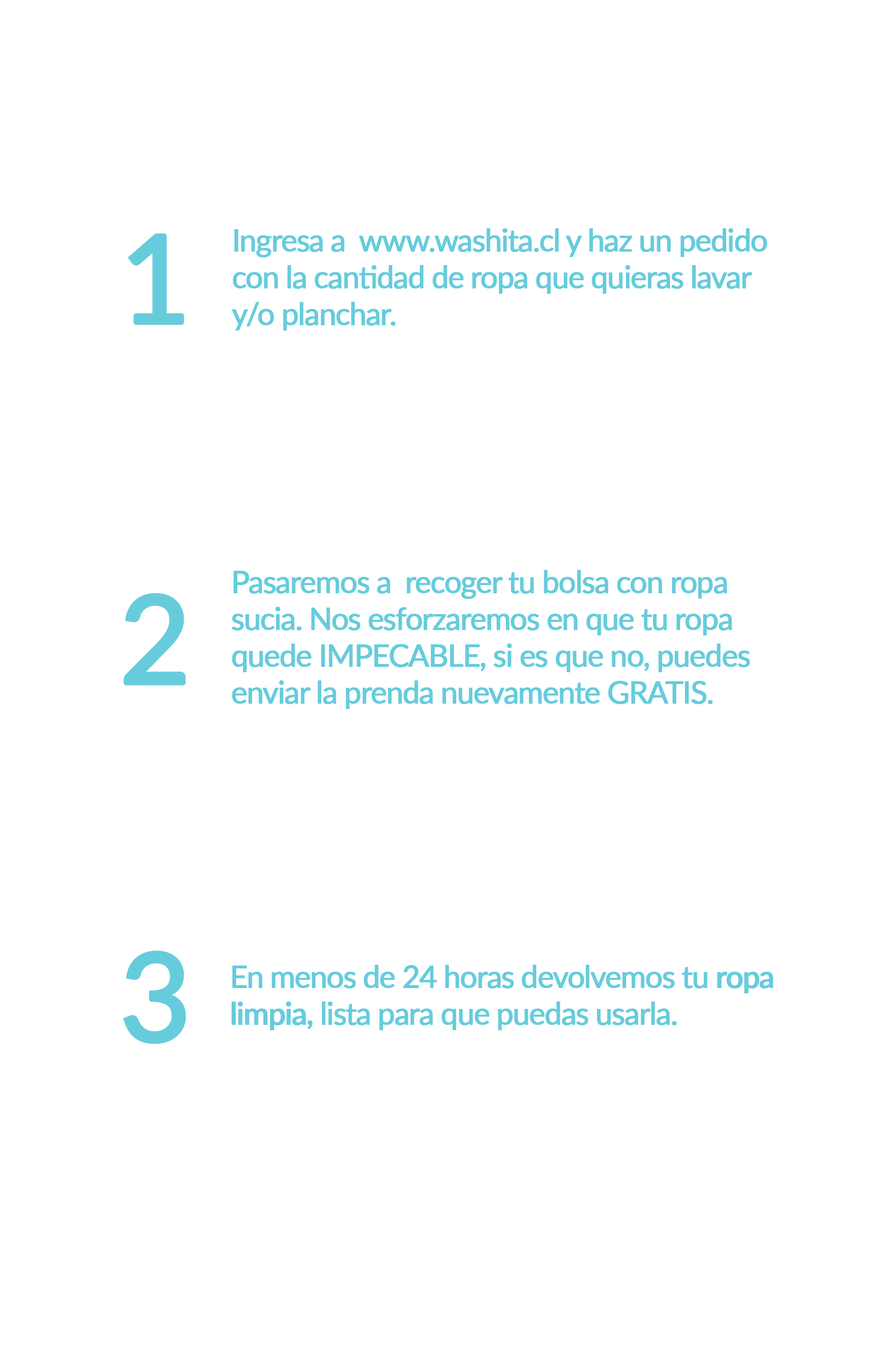
<style>
.page{position:relative;width:881px;height:1353px;background:#ffffff}
.page>*{position:absolute;margin:0}
.t1{font:122.8px "Lato-Regular";letter-spacing:-0.05em;color:#66ccdc;font-weight:bold}
.t2{font:30.7px "Lato-Regular";letter-spacing:-0.05em;color:#66ccdc;font-weight:bold}
.t3{font:30.7px "Lato-Semibold";letter-spacing:-0.05em;color:#66ccdc;font-weight:bold}
</style>
<div class="page">
<p class="t1" style="left:128px;top:233px;width:56px;height:92px">1</p>
<p class="t2" style="left:232px;top:228px;width:535px;height:103px;text-align:right">Ingresa a  www.washita.cl y haz un pedido <br>con la cantidad de ropa que quieras lavar <br>y/o planchar.</p>
<p class="t2" style="left:232px;top:570px;width:518px;height:139px;text-align:right">Pasaremos a  recoger tu bolsa con ropa <br>sucia. Nos esforzaremos en que tu ropa <br>quede IMPECABLE, si es que no, puedes <br>enviar la prenda nuevamente GRATIS.</p>
<p class="t1" style="left:124px;top:593px;width:62px;height:93px">2</p>
<p class="t1" style="left:123px;top:951px;width:63px;height:93px">3</p>
<p class="t2" style="left:232px;top:965px;width:541px;height:65px;text-align:right">En menos de 24 horas devolvemos tu <span class="t3">ropa <br>limpia,</span> lista para que puedas usarla.</p>
</div>
